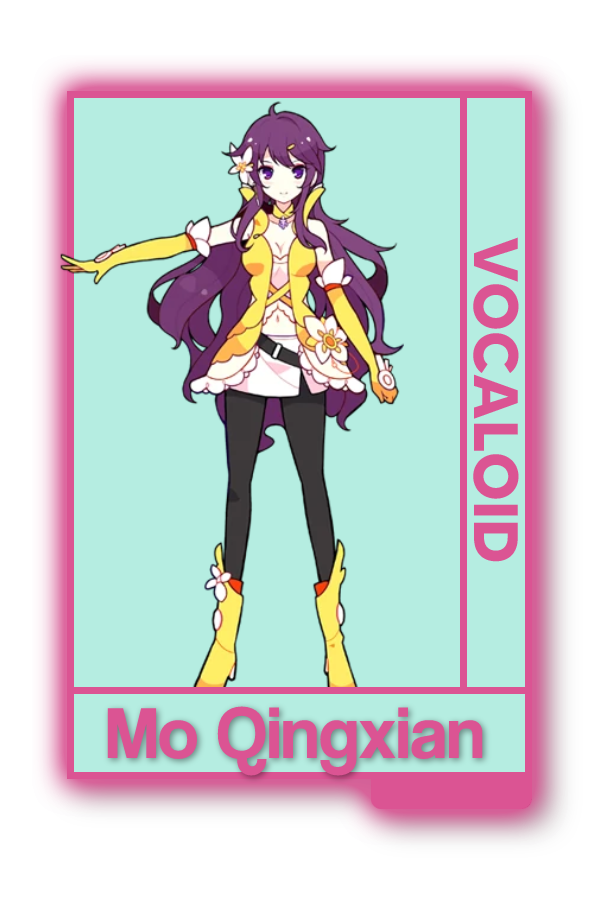
<style>
.page{position:relative;width:600px;height:900px;background:#b5ede1}
.page>*{position:absolute;margin:0}
.t1{font:62.5px "MADETOMMY-Bold";color:#db5493}
.t2{font:75px "CoolveticaRg-Regular";color:#db5493}
</style>
<div class="page">
<p class="t1" style="left:473px;top:237px;width:46px;height:325px;rotate:90deg">VOCALOID</p>
<p class="t2" style="left:107px;top:706px;width:376px;height:70px">Mo Qingxian</p>
</div>
